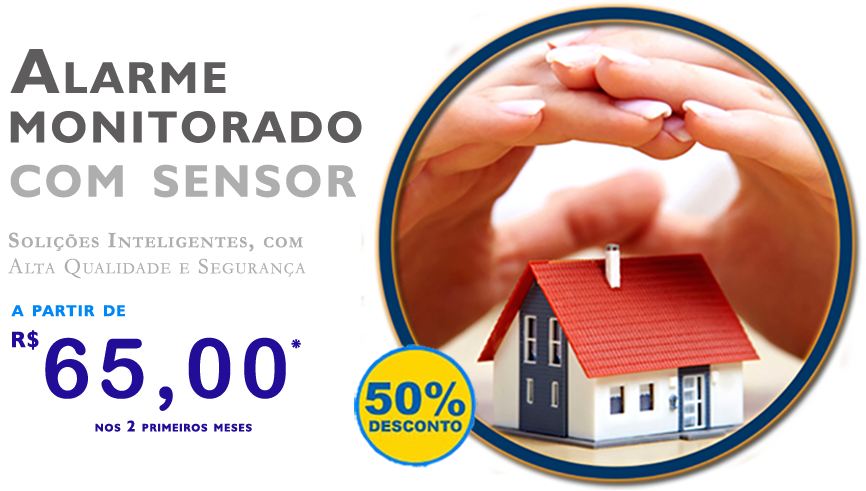
<style>
.page{position:relative;width:866px;height:491px;background:#ffffff}
.page>*{position:absolute;margin:0}
.t1{font:64.1px "Humanist521BT-Bold";letter-spacing:0.075em;color:#5e5c5c;font-variant:small-caps}
.t2{font:65.7px "Humanist521BT-Bold";letter-spacing:0.075em;color:#afaeae;font-variant:small-caps}
.t3{font:22.5px "Garamond-Bold";letter-spacing:0.075em;color:#afaeae;font-variant:small-caps}
.t4{font:22.5px "Garamond";letter-spacing:0.075em;color:#afaeae;font-variant:small-caps}
.t5{font:22.5px "Humanist521BT-Bold";letter-spacing:0.075em;color:#0087f6;font-variant:small-caps}
.t6{font:22.5px "Humanist521BT-Bold";letter-spacing:0.075em;color:#220d99;font-variant:small-caps}
.t7{font:83px "ArialRoundedMTBold";letter-spacing:0.075em;color:#220d99;font-variant:small-caps}
.t8{font:15.6px "Humanist521BT-Bold";letter-spacing:0.075em;color:#220d99;font-variant:small-caps}
</style>
<div class="page">
<p class="t1" style="left:10px;top:49px;width:216px;height:44px">Alarme</p>
<p class="t1" style="left:10px;top:111px;width:352px;height:32px">monitorado</p>
<p class="t2" style="left:10px;top:164px;width:346px;height:34px">com sensor</p>
<p class="t3" style="left:9px;top:232px;width:294px;height:20px">Solições Inteligentes, com</p>
<p class="t4" style="left:7px;top:258px;width:299px;height:21px">Alta Qualidade e Segurança</p>
<p class="t5" style="left:11px;top:305px;width:114px;height:12px">a partir de</p>
<p class="t6" style="left:12px;top:330px;width:27px;height:20px">R$</p>
<p class="t7" style="left:45px;top:337px;width:241px;height:74px">65,00</p>
<p class="t6" style="left:291px;top:339px;width:10px;height:10px">*</p>
<p class="t8" style="left:95px;top:420px;width:157px;height:12px">nos 2 primeiros meses</p>
</div>
